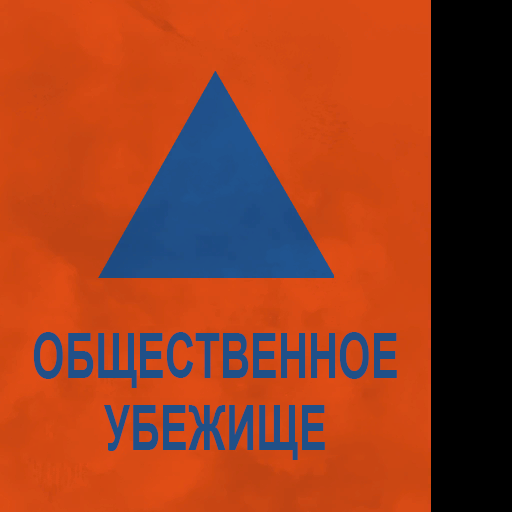
<style>
.page{position:relative;width:512px;height:512px}
.page>*{position:absolute;margin:0}
.t1{font:62.7px/72px "Arial-BoldMT";color:#205088;scale:0.67 1}
</style>
<div class="page">
<p class="t1" style="left:33px;top:332px;width:364px;height:128px;text-align:center">ОБЩЕСТВЕННОЕ<br>УБЕЖИЩЕ</p>
</div>
